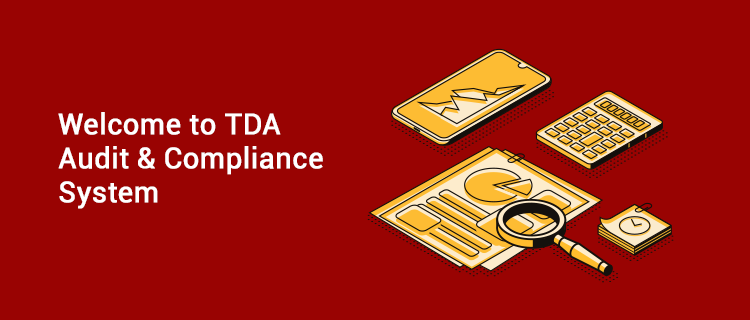
<style>
.page{position:relative;width:750px;height:320px;background:#990302}
.page>*{position:absolute;margin:0}
.t1{font:28.6px/34.2px "Roboto-Regular";color:#ffffff;font-weight:bold}
</style>
<div class="page">
<p class="t1" style="left:58px;top:112px;width:265px;height:97px">Welcome to TDA<br>Audit &amp; Compliance<br>System</p>
</div>
